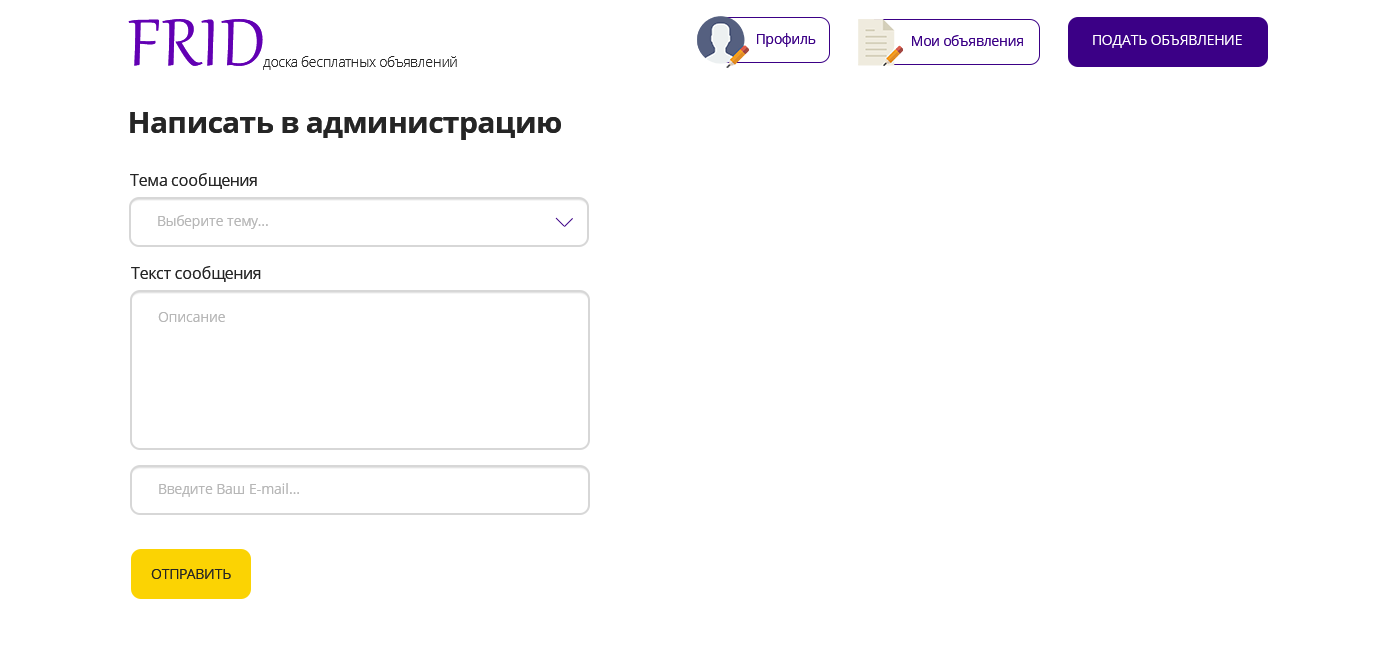
<style>
.page{position:relative;width:1400px;height:650px;background:#ffffff}
.page>*{position:absolute;margin:0}
.t1{font:81.3px "Gabriola";letter-spacing:0.025em;color:#6200b3}
.t2{font:14px "OpenSans";letter-spacing:-0.024em;color:#3b0086}
.t3{font:14px "OpenSans";letter-spacing:-0.024em;color:#ffffff}
.t4{font:14px "OpenSans-Light";letter-spacing:-0.024em;color:#252525}
.t5{font:30px "OpenSans-Bold";letter-spacing:-0.024em;color:#252525}
.t6{font:16px "OpenSans";letter-spacing:-0.024em;color:#252525}
.t7{font:14px "OpenSans";letter-spacing:-0.024em;color:#b7b7b7}
.t8{font:14px "OpenSans";letter-spacing:-0.024em;color:#252525}
</style>
<div class="page">
<p class="t1" style="left:128px;top:19px;width:135px;height:47px">FRID</p>
<p class="t2" style="left:757px;top:33px;width:59px;height:14px">Профиль</p>
<p class="t2" style="left:912px;top:35px;width:111px;height:11px">Мои объявления</p>
<p class="t3" style="left:1093px;top:35px;width:149px;height:13px">ПОДАТЬ ОБЪЯВЛЕНИЕ</p>
<p class="t4" style="left:263px;top:56px;width:194px;height:14px">доска бесплатных объявлений</p>
<p class="t5" style="left:130px;top:112px;width:431px;height:28px">Написать в администрацию</p>
<p class="t6" style="left:130px;top:173px;width:127px;height:16px">Тема сообщения</p>
<p class="t7" style="left:158px;top:215px;width:110px;height:14px">Выберите тему...</p>
<p class="t6" style="left:131px;top:266px;width:130px;height:16px">Текст сообщения</p>
<p class="t7" style="left:158px;top:312px;width:67px;height:10px">Описание</p>
<p class="t7" style="left:159px;top:483px;width:140px;height:14px">Введите Ваш E-mail...</p>
<p class="t8" style="left:151px;top:569px;width:80px;height:10px">ОТПРАВИТЬ</p>
</div>
